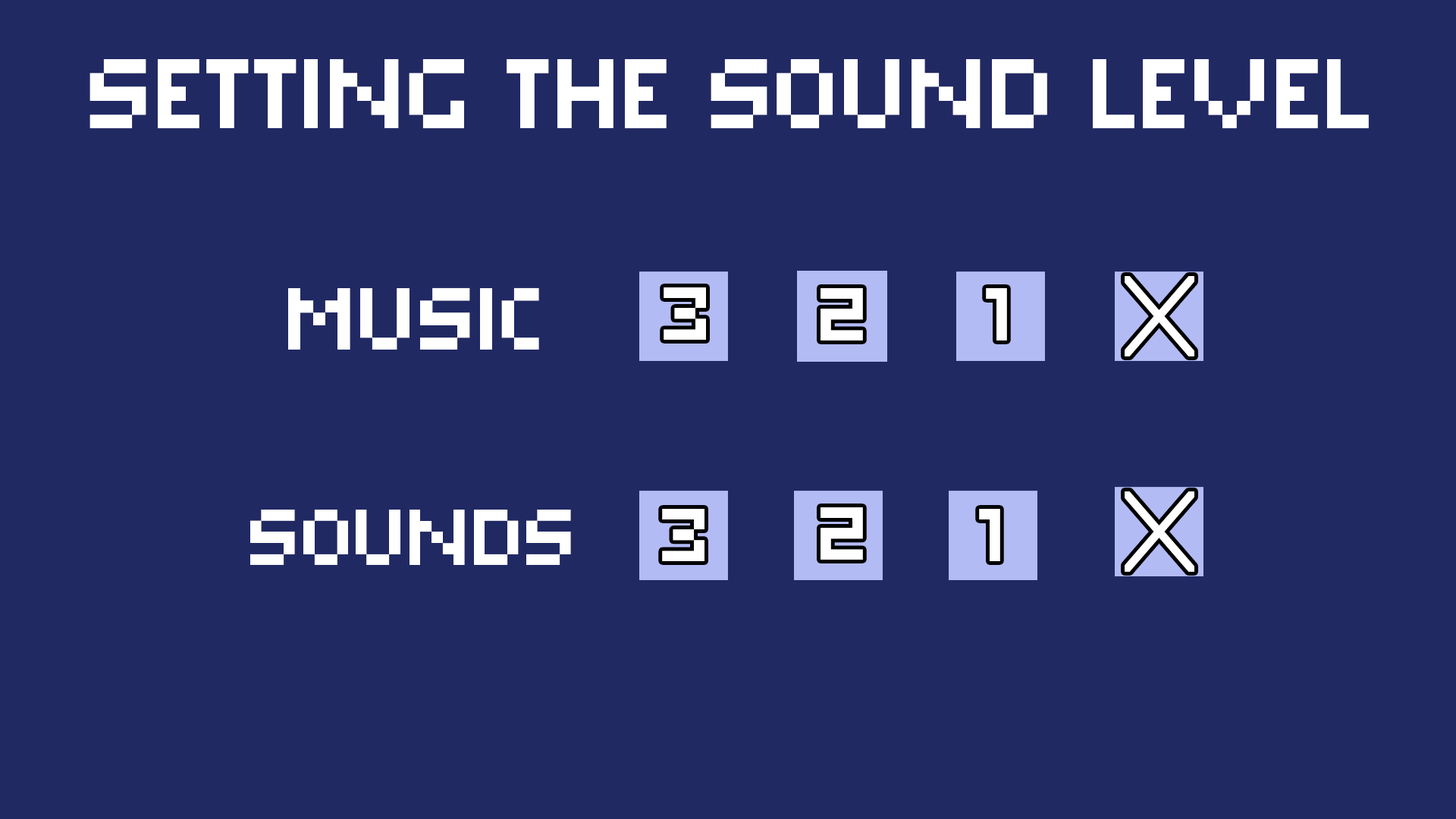
<style>
.page{position:relative;width:1456px;height:819px;background:#212963}
.page>*{position:absolute;margin:0}
.t1{font:98.6px "PixarOne";color:#ffffff}
.t2{font:87.7px "PixarOne";color:#ffffff}
.t3{font:75.2px "PixarOne";color:#ffffff}
.t4{font:78.6px "PixarOne";color:#ffffff}
</style>
<div class="page">
<p class="t1" style="left:89px;top:59px;width:1280px;height:70px">setting the sound level</p>
<p class="t2" style="left:288px;top:287px;width:251px;height:63px">Music</p>
<p class="t3" style="left:664px;top:287px;width:42px;height:53px">3</p>
<p class="t3" style="left:821px;top:288px;width:42px;height:52px">2</p>
<p class="t3" style="left:986px;top:288px;width:21px;height:52px">1</p>
<p class="t4" style="left:250px;top:510px;width:321px;height:55px">sounds</p>
<p class="t3" style="left:662px;top:509px;width:42px;height:52px">3</p>
<p class="t3" style="left:821px;top:507px;width:42px;height:53px">2</p>
<p class="t3" style="left:979px;top:509px;width:21px;height:52px">1</p>
</div>
